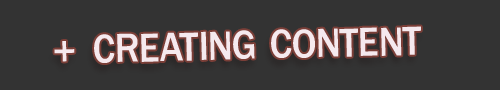
<style>
.page{position:relative;width:500px;height:90px;background:#333333}
.page>*{position:absolute;margin:0}
.t1{font:60px "FranklinGothic-Medium";letter-spacing:-0.01em;color:#f5e9ee;font-variant:small-caps;scale:0.92 1}
.t2{font:40px "FranklinGothic-Medium";color:#f5e9ee}
</style>
<div class="page">
<p class="t1" style="left:94px;top:26px;width:327px;height:37px;rotate:-2deg">creating content</p>
<p class="t2" style="left:54px;top:41px;width:21px;height:21px;rotate:-2deg">+</p>
</div>
